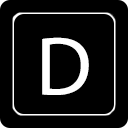
<style>
.page{position:relative;width:128px;height:128px;background:#000000}
.page>*{position:absolute;margin:0}
.t1{font:83.3px "MyriadPro-Regular";color:#ffffff}
</style>
<div class="page">
<p class="t1" style="left:42px;top:37px;width:47px;height:58px">D</p>
</div>
